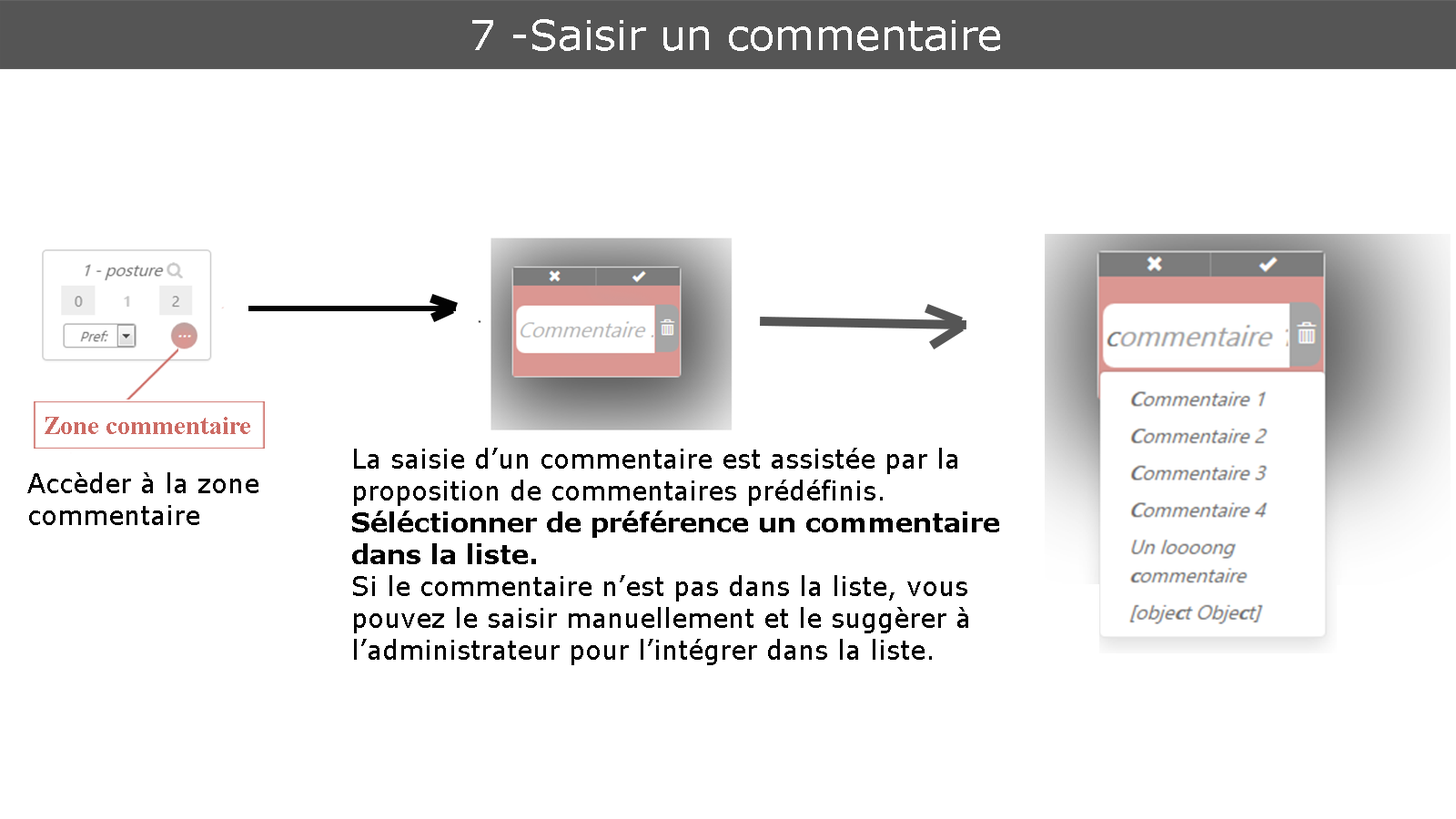
<style>
.page{position:relative;width:1456px;height:819px;background:#ffffff}
.page>*{position:absolute;margin:0}
.t1{font:41.7px "Verdana";color:#ffffff}
.t2{font:26.5px "TimesNewRomanPS-BoldMT";color:#cc6a63}
.t3{font:26.5px "Verdana";color:#000000}
.t4{font:26.5px "Verdana-Bold";color:#000000}
</style>
<div class="page">
<p class="t1" style="left:472px;top:19px;width:528px;height:32px">7 -Saisir un commentaire</p>
<p class="t2" style="left:45px;top:417px;width:205px;height:17px">Zone commentaire</p>
<p class="t3" style="left:352px;top:448px;width:647px;height:217px">La saisie d’un commentaire est assistée par la proposition de commentaires prédéfinis.<br><span class="t4">Séléctionner de préférence un commentaire dans la liste.<br></span>Si le commentaire n’est pas dans la liste, vous pouvez le saisir manuellement et le suggèrer à l’administrateur pour l’intégrer dans la liste.</p>
<p class="t3" style="left:27px;top:472px;width:231px;height:53px">Accèder à la zone commentaire</p>
</div>
